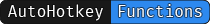
<style>
.page{position:relative;width:210px;height:24px;background:#191919}
.page>*{position:absolute;margin:0}
.t1{font:16px "FiraCode-Regular";color:#ffffff}
</style>
<div class="page">
<p class="t1" style="left:8px;top:4px;width:95px;height:17px">AutoHotkey</p>
<p class="t1" style="left:118px;top:4px;width:84px;height:13px">Functions</p>
</div>
